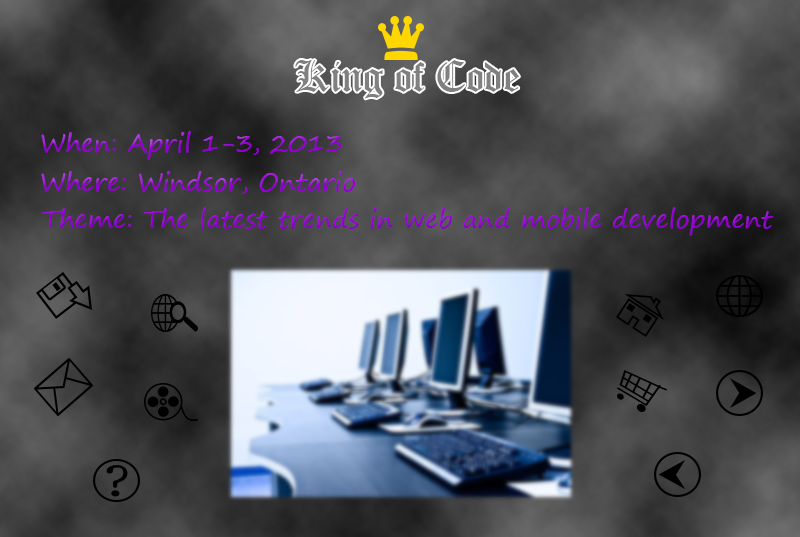
<style>
.page{position:relative;width:800px;height:537px}
.page>*{position:absolute;margin:0}
.t1{font:25px "SegoePrint";color:#9400d3}
</style>
<div class="page">
<p class="t1" style="left:41px;top:131px;width:301px;height:29px">When: April 1-3, 2013</p>
<p class="t1" style="left:41px;top:171px;width:315px;height:23px">Where: Windsor, Ontario</p>
<p class="t1" style="left:42px;top:207px;width:732px;height:29px">Theme: The latest trends in web and mobile development</p>
</div>
